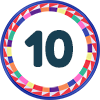
<style>
.page{position:relative;width:100px;height:100px;background:#ffffff}
.page>*{position:absolute;margin:0}
.t1{font:49.8px "ForkdokaOne-Regular";color:#183f52}
</style>
<div class="page">
<p class="t1" style="left:24px;top:30px;width:49px;height:38px">10</p>
</div>
